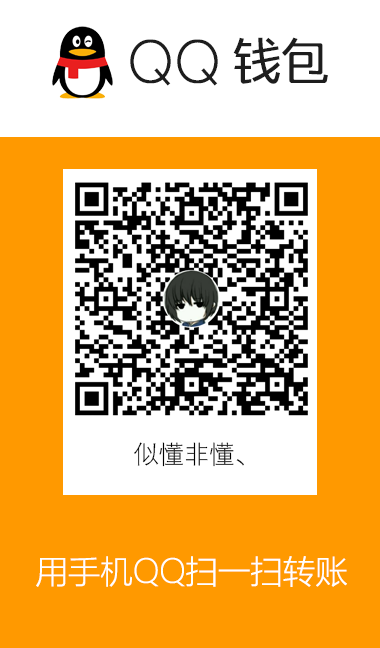
<style>
.page{position:relative;width:380px;height:648px;background:#ff9900}
.page>*{position:absolute;margin:0}
.t1{font:48px "MFDianHei_Noncommercial-Light";color:#1d1d1d}
.t2{font:25.2px "DengXian-Light";color:#000000}
.t3{font:32.4px "MicrosoftYaHeiLight";color:#ffffff}
</style>
<div class="page">
<p class="t1" style="left:130px;top:37px;width:198px;height:49px">QQ钱包</p>
<p class="t2" style="left:134px;top:442px;width:110px;height:25px">似懂非懂、</p>
<p class="t2" style="left:134px;top:442px;width:110px;height:25px">似懂非懂、</p>
<p class="t2" style="left:134px;top:442px;width:110px;height:25px">似懂非懂、</p>
<p class="t3" style="left:36px;top:556px;width:311px;height:31px">用手机QQ扫一扫转账</p>
</div>
